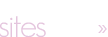
<style>
.page{position:relative;width:108px;height:37px;background:#ffffff}
.page>*{position:absolute;margin:0}
.t1{font:34.7px "GeosansLight";letter-spacing:-0.05em;color:#e4c5dd}
</style>
<div class="page">
<p class="t1" style="left:0px;top:16px;width:46px;height:22px">sites</p>
</div>
